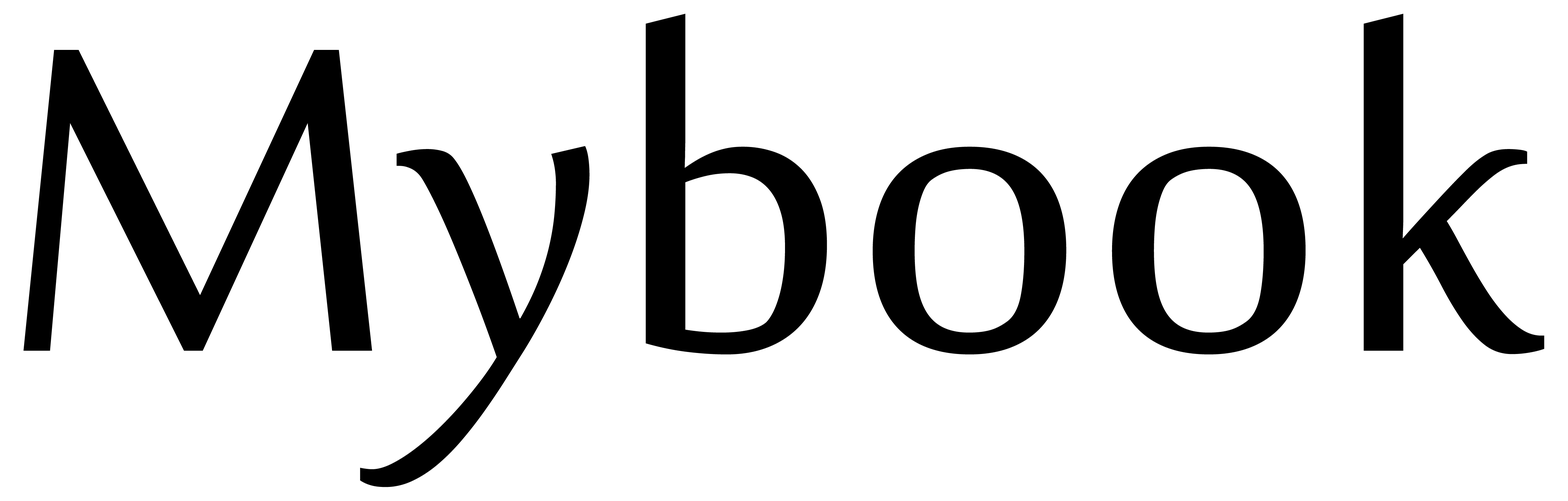
<style>
.page{position:relative;width:1568px;height:501px;background:#ffffff}
.page>*{position:absolute;margin:0}
.t1{font:597px "SakkalMajalla";color:#000000}
</style>
<div class="page">
<p class="t1" style="left:23px;top:14px;width:1521px;height:473px">Mybook</p>
</div>
